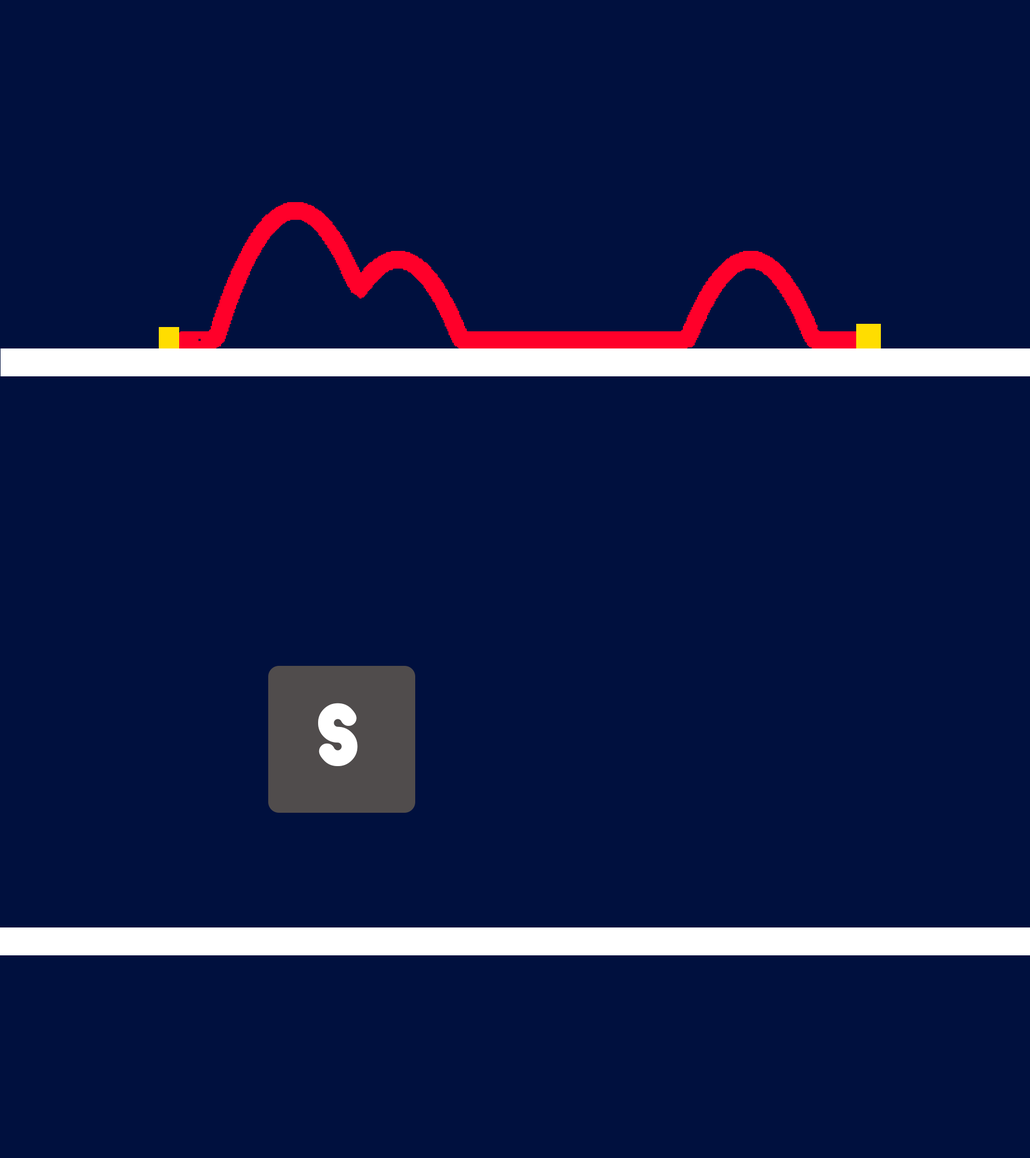
<style>
.page{position:relative;width:1030px;height:1158px;background:#00103e}
.page>*{position:absolute;margin:0}
.t1{font:80.4px "Dunkin";color:#ffffff}
</style>
<div class="page">
<p class="t1" style="left:318px;top:703px;width:40px;height:63px">S</p>
</div>
